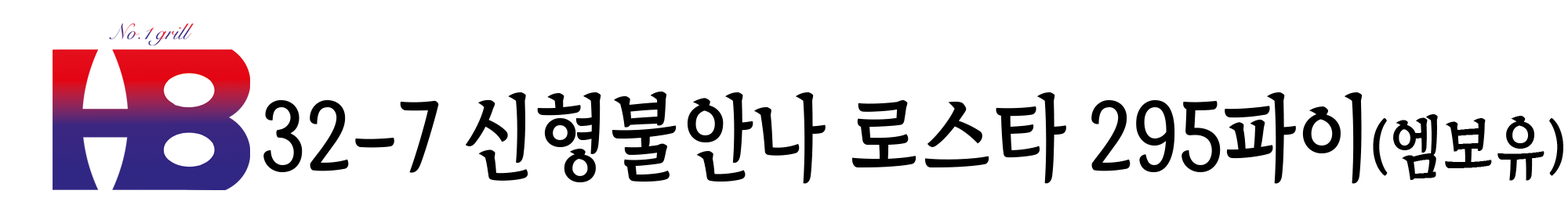
<style>
.page{position:relative;width:1568px;height:205px;background:#ffffff}
.page>*{position:absolute;margin:0}
.t1{font:93.7px "TheIndependenceHallofKorea-Regular";color:#000000;scale:0.89 1}
.t2{font:67.9px "TheIndependenceHallofKorea-Regular";color:#000000;scale:0.89 1}
</style>
<div class="page">
<p class="t1" style="left:263px;top:92px;width:1300px;height:92px">32-7 신형불안나 로스타 295파이<span class="t2">(엠보유)</span></p>
</div>
